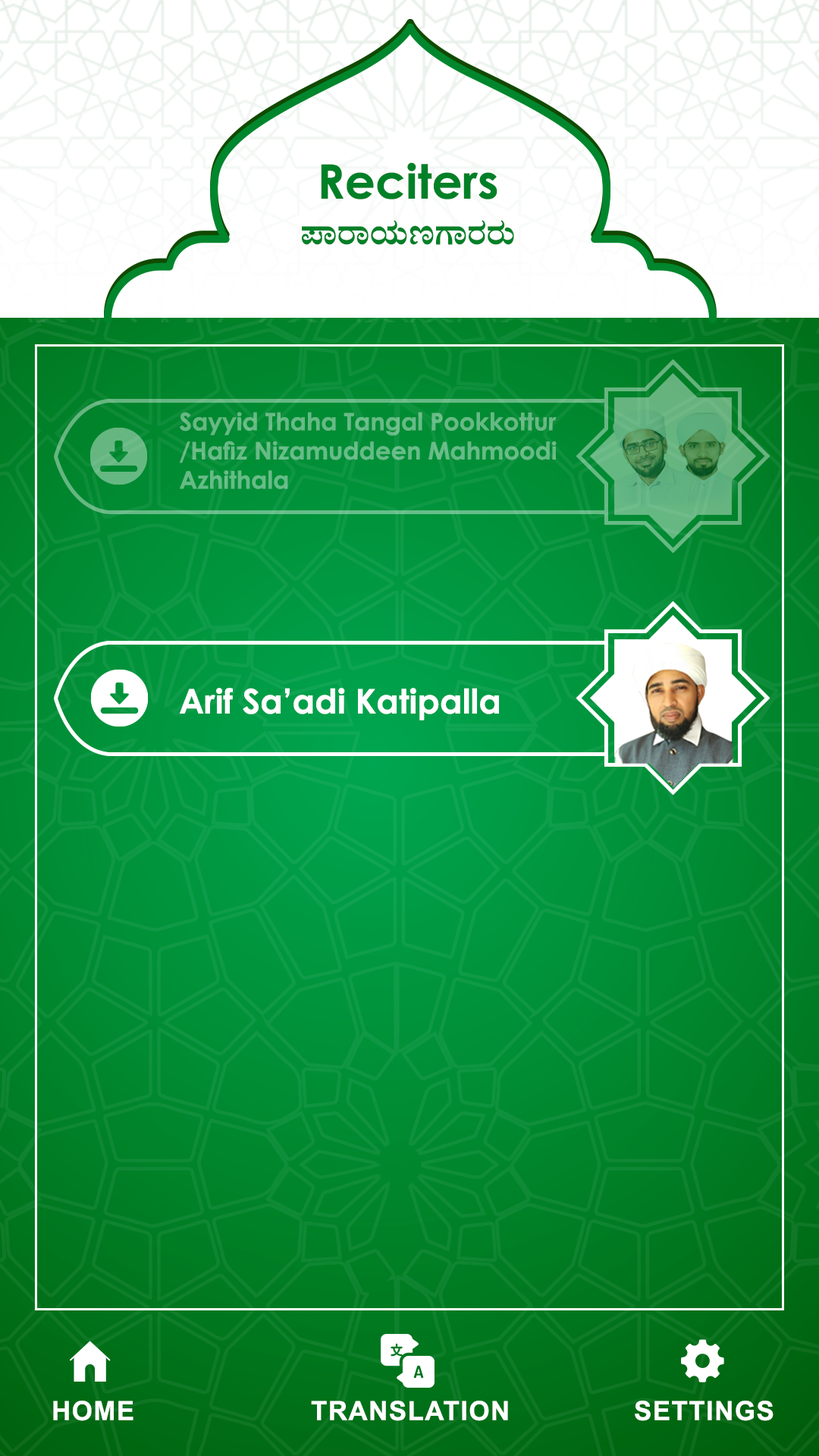
<style>
.page{position:relative;width:819px;height:1456px}
.page>*{position:absolute;margin:0}
.t1{font:47.5px "CenturyGothic-Bold";color:#008027}
.t2{font:36.4px "Nudi01eBold";color:#008027}
.t3{font:24.3px "CenturyGothic-Bold";color:#66bb86}
.t4{font:33.9px "CenturyGothic-Bold";color:#ffffff}
.t5{font:26.5px "Arial-BoldMT";letter-spacing:0.04em;color:#ffffff}
</style>
<div class="page">
<p class="t1" style="left:321px;top:162px;width:176px;height:37px">Reciters</p>
<p class="t2" style="left:302px;top:220px;width:212px;height:25px">¥ÁgÁAiÀÄtUÁgÀgÀÄ</p>
<p class="t3" style="left:180px;top:412px;width:377px;height:77px">Sayyid Thaha Tangal Pookkottur <br>/Hafiz Nizamuddeen Mahmoodi<br>Azhithala</p>
<p class="t4" style="left:180px;top:688px;width:319px;height:32px">Arif Sa’adi Katipalla</p>
<p class="t5" style="left:53px;top:1401px;width:80px;height:20px">HOME</p>
<p class="t5" style="left:311px;top:1401px;width:197px;height:20px">TRANSLATION</p>
<p class="t5" style="left:635px;top:1401px;width:138px;height:20px">SETTINGS</p>
</div>
